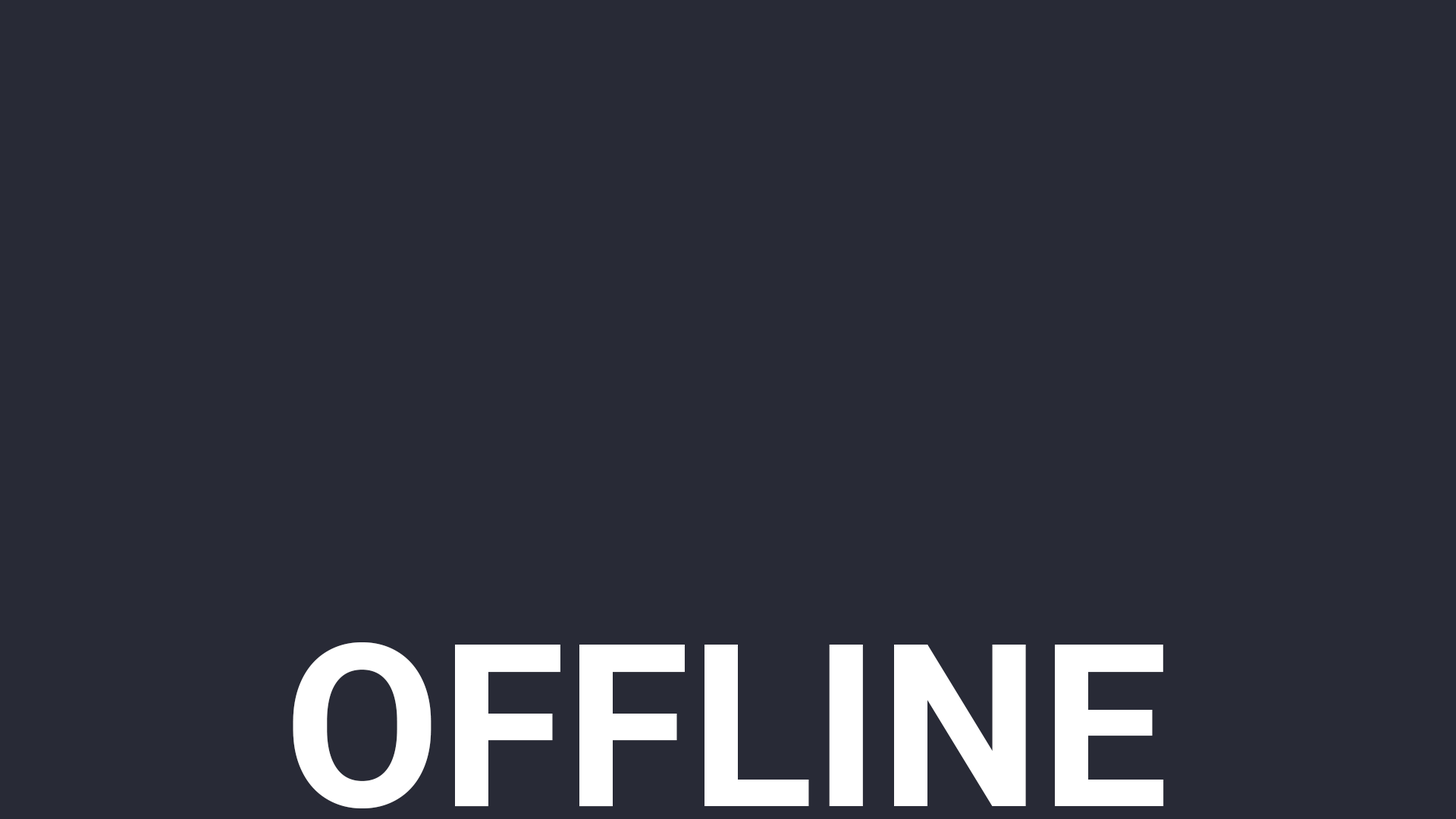
<style>
.page{position:relative;width:1456px;height:819px;background:#282a36}
.page>*{position:absolute;margin:0}
.t1{font:227.5px "Roboto-Bold";color:#ffffff}
</style>
<div class="page">
<p class="t1" style="left:293px;top:642px;width:871px;height:166px">OFFLINE</p>
</div>
